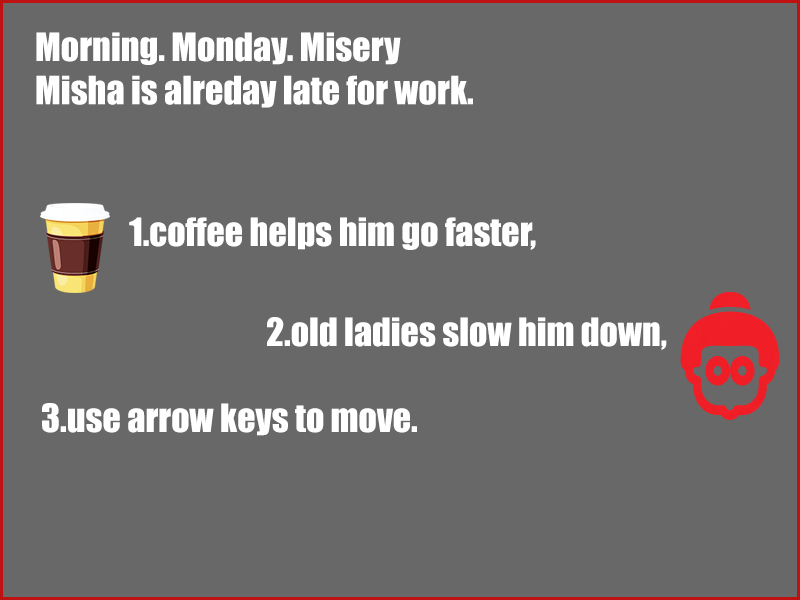
<style>
.page{position:relative;width:800px;height:600px;background:#686868}
.page>*{position:absolute;margin:0}
.t1{font:36px "Impact";color:#ffffff}
</style>
<div class="page">
<p class="t1" style="left:36px;top:32px;width:437px;height:76px">Morning. Monday. Misery<br>Misha is alreday late for work.</p>
<p class="t1" style="left:129px;top:217px;width:407px;height:33px">1.coffee helps him go faster,</p>
<p class="t1" style="left:267px;top:317px;width:400px;height:33px">2.old ladies slow him down,</p>
<p class="t1" style="left:42px;top:403px;width:375px;height:33px">3.use arrow keys to move.</p>
</div>
